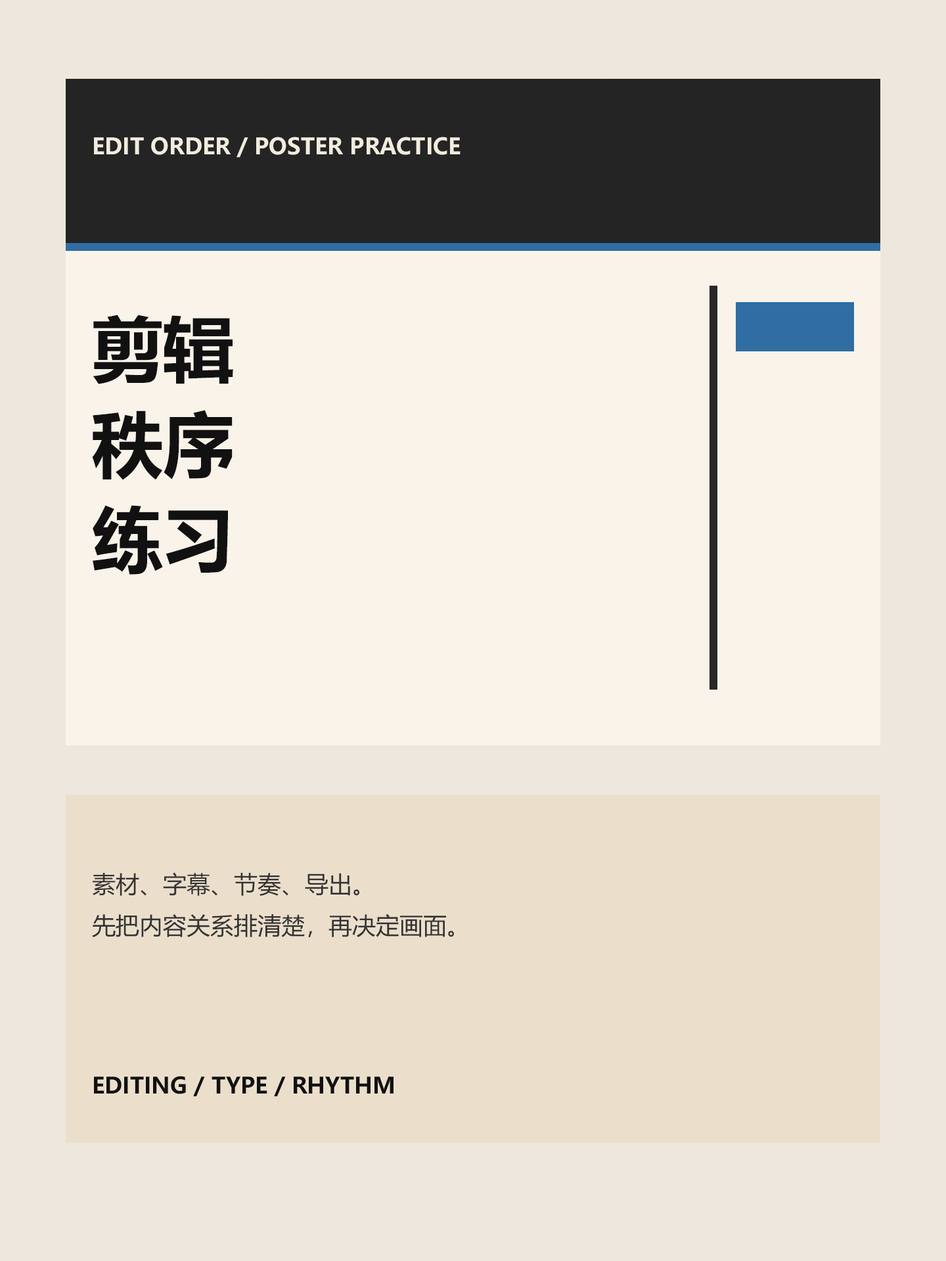
<style>
.page{position:relative;width:946px;height:1261px;background:#f9f3ea}
.page>*{position:absolute;margin:0}
.t1{font:22.3px "MicrosoftYaHeiUI-Bold";color:#f2ecdf}
.t2{font:70.9px "MicrosoftYaHeiUI-Bold";color:#111111}
.t3{font:23.6px "MicrosoftYaHeiUI";color:#333333}
.t4{font:22.3px "MicrosoftYaHeiUI-Bold";color:#111111}
</style>
<div class="page">
<p class="t1" style="left:94px;top:137px;width:366px;height:21px">EDIT ORDER / POSTER PRACTICE</p>
<p class="t2" style="left:93px;top:315px;width:140px;height:69px">剪辑</p>
<p class="t2" style="left:92px;top:410px;width:140px;height:70px">秩序</p>
<p class="t2" style="left:93px;top:505px;width:135px;height:70px">练习</p>
<p class="t3" style="left:92px;top:872px;width:362px;height:65px">素材、字幕、节奏、导出。<br>先把内容关系排清楚，再决定画面。</p>
<p class="t4" style="left:94px;top:1076px;width:299px;height:21px">EDITING / TYPE / RHYTHM</p>
</div>
